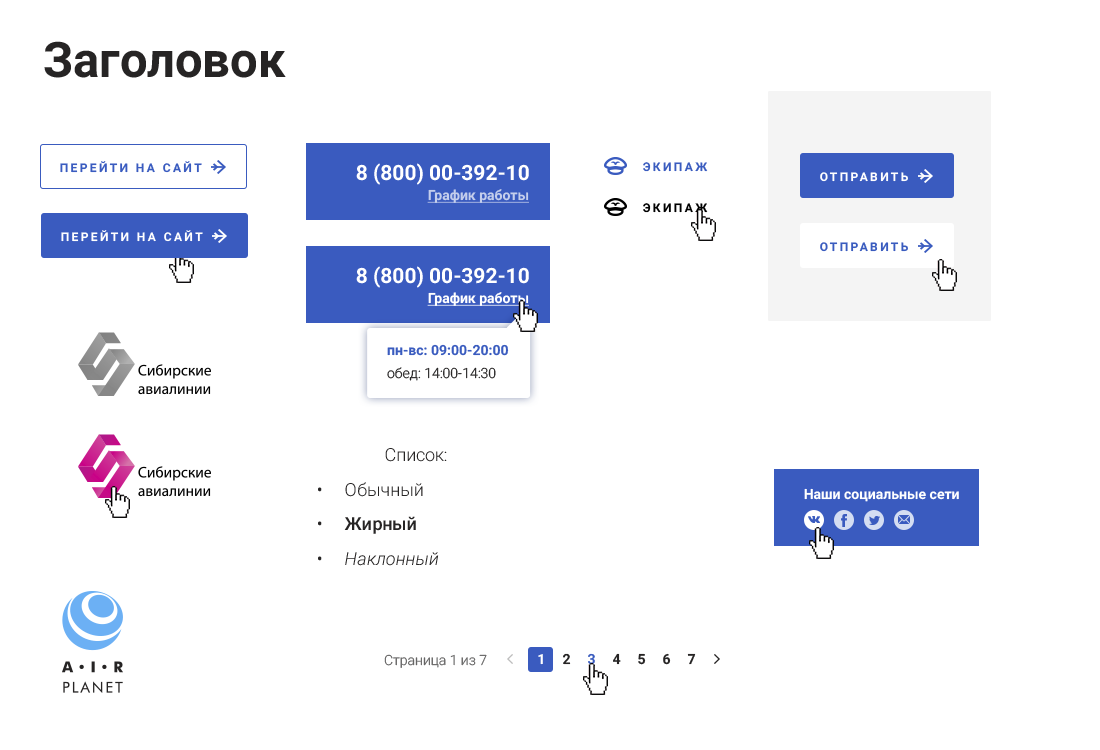
<style>
.page{position:relative;width:1100px;height:750px;background:#ffffff}
.page>*{position:absolute;margin:0}
.t1{font:49px "Roboto-Bold";color:#262424}
.t2{font:12px "Roboto-Bold";letter-spacing:0.2em;color:#3a5bc0;text-transform:uppercase}
.t3{font:21px "Roboto-Bold";color:#ffffff;text-transform:uppercase}
.t4{font:12px "Roboto-Bold";letter-spacing:0.2em;color:#3a5bbf;text-transform:uppercase}
.t5{font:12px "Roboto-Bold";letter-spacing:0.2em;color:#ffffff;text-transform:uppercase}
.t6{font:14px "Roboto-Bold";color:#c4ceec;text-decoration:underline}
.t7{font:12px "Roboto-Bold";letter-spacing:0.2em;color:#000000;text-transform:uppercase}
.t8{font:14px "Roboto-Bold";color:#ffffff;text-decoration:underline}
.t9{font:14px/18px "Roboto-Bold";color:#3a5bbf}
.t10{font:14px/18px "Roboto-Light";color:#262424}
.t11{font:18px/30px "Roboto-Light";color:#262424}
.t12{font:18px/30px "Roboto-Medium";color:#262424}
.t13{font:18px/30px "Roboto-LightItalic";color:#262424}
.t14{font:14px "Roboto-Bold";color:#ffffff}
.t15{font:14px "Roboto-Light";color:#656464}
.t16{font:14px "Roboto-Bold";color:#262424}
.t17{font:14px "Roboto-Bold";color:#3a5bbf}
</style>
<div class="page">
<p class="t1" style="left:44px;top:41px;width:242px;height:37px">Заголовок</p>
<p class="t2" style="left:60px;top:161px;width:142px;height:12px">Перейти на сайт</p>
<p class="t3" style="left:356px;top:163px;width:173px;height:22px">8 (800) 00-392-10</p>
<p class="t4" style="left:643px;top:162px;width:65px;height:10px">Экипаж</p>
<p class="t5" style="left:820px;top:172px;width:88px;height:10px">Отправить</p>
<p class="t6" style="left:427px;top:189px;width:102px;height:14px">График работы</p>
<p class="t7" style="left:643px;top:203px;width:65px;height:10px">Экипаж</p>
<p class="t5" style="left:61px;top:230px;width:142px;height:12px">Перейти на сайт</p>
<p class="t4" style="left:820px;top:242px;width:88px;height:10px">Отправить</p>
<p class="t3" style="left:356px;top:266px;width:173px;height:22px">8 (800) 00-392-10</p>
<p class="t8" style="left:427px;top:292px;width:102px;height:14px">График работы</p>
<p class="t9" style="left:387px;top:344px;width:122px;height:37px">пн-вс: 09:00-20:00<br><span class="t10">обед: 14:00-14:30</span></p>
<p class="t11" style="left:318px;top:448px;width:129px;height:118px;text-align:center">Список:<br>•     Обычный<br>•     <span class="t12">Жирный<br></span>•     <span class="t13">Наклонный</span></p>
<p class="t14" style="left:804px;top:488px;width:155px;height:14px">Наши социальные сети</p>
<p class="t15" style="left:384px;top:654px;width:103px;height:14px">Страница 1 из 7</p>
<p class="t14" style="left:538px;top:654px;width:5px;height:11px">1</p>
<p class="t16" style="left:563px;top:653px;width:8px;height:12px">2</p>
<p class="t17" style="left:588px;top:653px;width:7px;height:12px">3</p>
<p class="t16" style="left:613px;top:653px;width:8px;height:12px">4</p>
<p class="t16" style="left:638px;top:653px;width:8px;height:12px">5</p>
<p class="t16" style="left:663px;top:653px;width:8px;height:12px">6</p>
<p class="t16" style="left:687px;top:653px;width:9px;height:12px">7</p>
</div>
